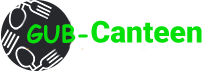
<style>
.page{position:relative;width:209px;height:72px;background:#ffffff}
.page>*{position:absolute;margin:0}
.t1{font:30px "Roboto-Black";color:#06e00a}
.t2{font:24px "ComicSansMS-Bold";color:#06e00a}
</style>
<div class="page">
<p class="t1" style="left:27px;top:20px;width:175px;height:24px"><span class="t2">GUB-</span>Canteen</p>
</div>
